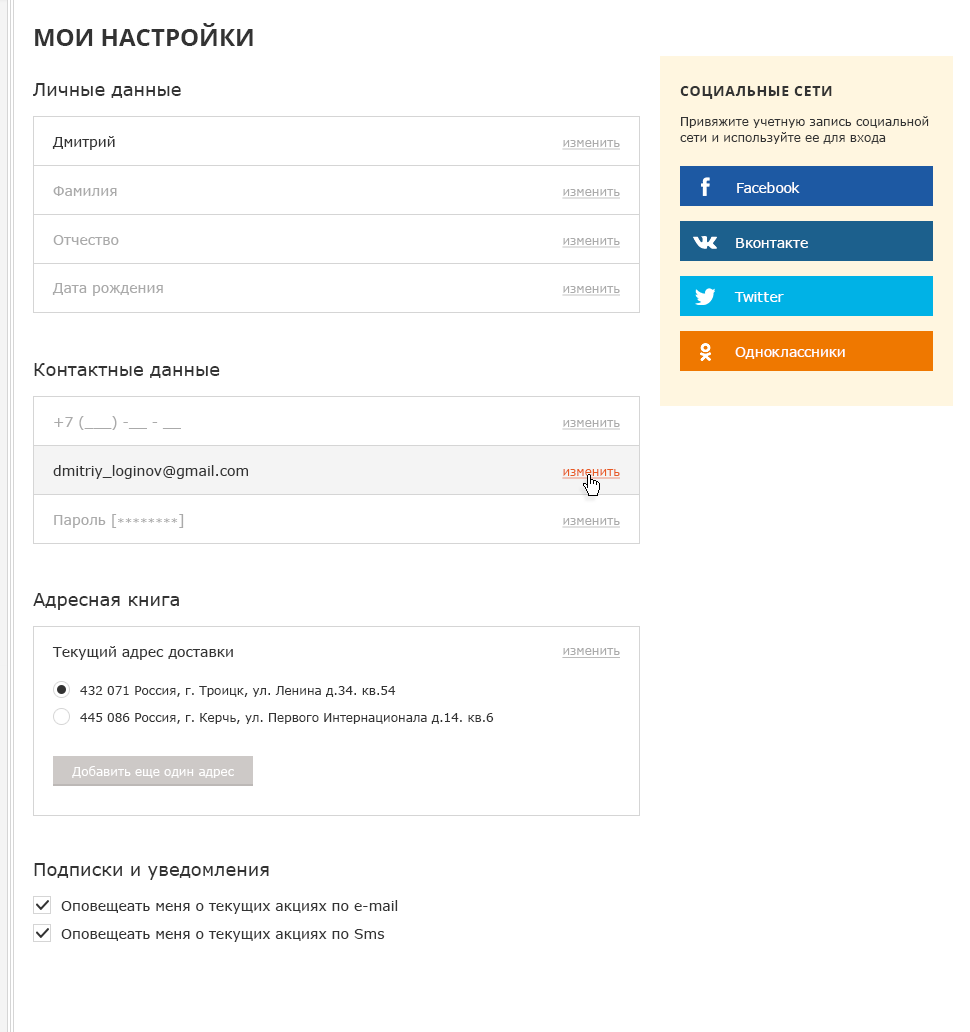
<style>
.page{position:relative;width:970px;height:1032px;background:#ffffff}
.page>*{position:absolute;margin:0}
.t1{font:24px "OpenSans-Bold";color:#333333;text-transform:uppercase}
.t2{font:18px "Verdana";color:#333333}
.t3{font:14px "OpenSans-Bold";letter-spacing:0.05em;color:#333333;text-transform:uppercase}
.t4{font:12px/16px "Verdana";color:#333333}
.t5{font:12px "Verdana";color:#aaaaaa;text-decoration:underline}
.t6{font:14px "Verdana";color:#333333}
.t7{font:14px "Verdana";color:#ffffff}
.t8{font:14px "Verdana";color:#aaaaaa}
.t9{font:12px "Verdana";color:#e85a22;text-decoration:underline}
.t10{font:12px "Verdana";color:#aaaaaa}
.t11{font:12px "Verdana";color:#333333}
.t12{font:12px "Verdana";color:#ffffff}
</style>
<div class="page">
<p class="t1" style="left:35px;top:23px;width:218px;height:23px">мои настройки</p>
<p class="t2" style="left:33px;top:83px;width:148px;height:15px">Личные данные</p>
<p class="t3" style="left:680px;top:86px;width:152px;height:13px">Социальные сети</p>
<p class="t4" style="left:680px;top:116px;width:249px;height:28px">Привяжите учетную запись социальной сети и используйте ee для входа</p>
<p class="t5" style="left:52px;top:136px;width:568px;height:14px"><span class="t6">Дмитрий </span>изменить</p>
<p class="t7" style="left:737px;top:182px;width:63px;height:11px">Facebook</p>
<p class="t5" style="left:53px;top:186px;width:567px;height:13px"><span class="t8">Фамилия </span>изменить</p>
<p class="t8" style="left:53px;top:235px;width:567px;height:13px">Отчество <span class="t5">изменить</span></p>
<p class="t7" style="left:736px;top:238px;width:72px;height:10px">Вконтакте</p>
<p class="t8" style="left:52px;top:283px;width:568px;height:13px">Дата рождения <span class="t5">изменить</span></p>
<p class="t7" style="left:734px;top:292px;width:50px;height:10px">Twitter</p>
<p class="t7" style="left:735px;top:347px;width:110px;height:12px">Одноклассники</p>
<p class="t2" style="left:34px;top:363px;width:186px;height:15px">Контактные данные</p>
<p class="t8" style="left:54px;top:416px;width:566px;height:14px">+7 (___) -__ - __ <span class="t5">изменить</span></p>
<p class="t6" style="left:53px;top:465px;width:567px;height:14px">dmitriy_loginov@gmail.com <span class="t9">изменить</span></p>
<p class="t8" style="left:54px;top:514px;width:566px;height:14px">Пароль [<span class="t10">********</span>] <span class="t5">изменить</span></p>
<p class="t2" style="left:33px;top:593px;width:146px;height:17px">Адресная книга</p>
<p class="t6" style="left:52px;top:646px;width:181px;height:14px">Текущий адрес доставки</p>
<p class="t5" style="left:562px;top:648px;width:58px;height:10px">изменить</p>
<p class="t11" style="left:80px;top:686px;width:316px;height:11px">432 071 Россия, г. Троицк, ул. Ленина д.34. кв.54</p>
<p class="t11" style="left:80px;top:713px;width:414px;height:11px">445 086 Россия, г. Керчь, ул. Первого Интернационала д.14. кв.6</p>
<p class="t12" style="left:72px;top:766px;width:162px;height:12px">Добавить еще один адрес</p>
<p class="t2" style="left:34px;top:863px;width:235px;height:17px">Подписки и уведомления</p>
<p class="t6" style="left:61px;top:900px;width:337px;height:14px">Оповещеать меня о текущих акциях по e-mail</p>
<p class="t6" style="left:61px;top:929px;width:324px;height:13px">Оповещеать меня о текущих акциях по Sms</p>
</div>
